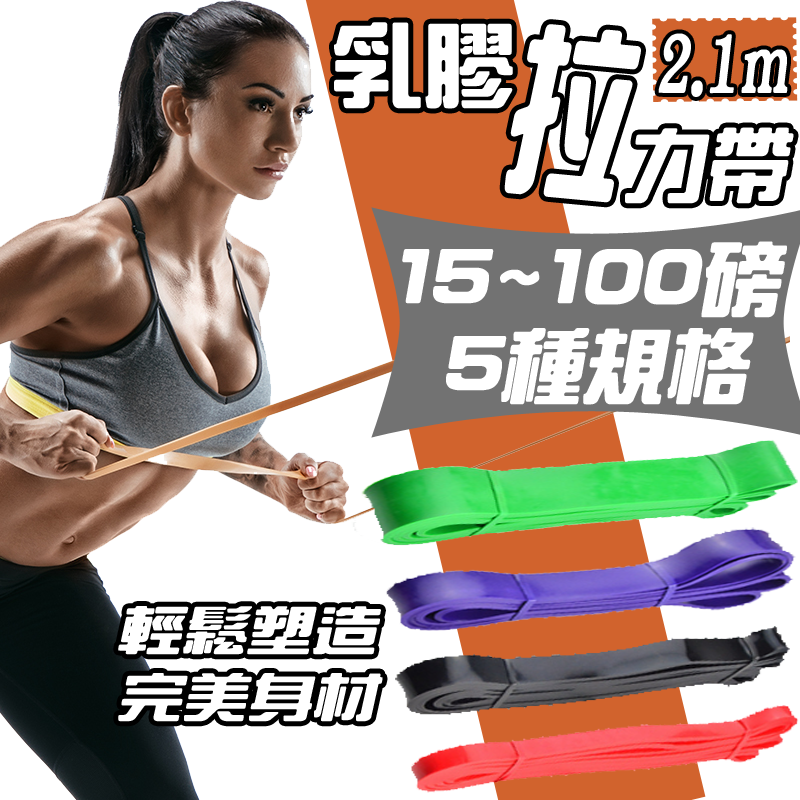
<style>
.page{position:relative;width:800px;height:800px;background:#ffffff}
.page>*{position:absolute;margin:0}
.t1{font:90px "HanWangZonYi";color:#ffffff;font-weight:bold}
.t2{font:179.8px "HanWangZonYi";color:#ffffff;font-weight:bold;font-style:italic;scale:0.65 1}
.t3{font:86.5px "HanWangYanKai";color:#ffffff;font-weight:bold;font-style:italic;scale:0.65 1}
.t4{font:79.3px "HanWangZonYi";color:#ffffff;font-weight:bold;font-style:italic}
.t5{font:80px "HanWangZonYi";color:#ffffff;font-weight:bold;font-style:italic}
.t6{font:50.4px "HanWangZonYi";color:#ffffff;font-weight:bold;font-style:italic;scale:1.25 1}
</style>
<div class="page">
<p class="t1" style="left:334px;top:22px;width:179px;height:87px">乳膠</p>
<p class="t2" style="left:504px;top:24px;width:137px;height:179px;rotate:5deg">拉</p>
<p class="t3" style="left:658px;top:33px;width:130px;height:64px">2.1m</p>
<p class="t4" style="left:625px;top:127px;width:169px;height:77px">力帶</p>
<p class="t5" style="left:402px;top:241px;width:385px;height:77px">15~100磅</p>
<p class="t5" style="left:446px;top:328px;width:308px;height:77px">5種規格</p>
<p class="t6" style="left:118px;top:606px;width:265px;height:116px">輕鬆塑造<br>完美身材</p>
</div>
